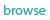
<style>
.page{position:relative;width:50px;height:20px;background:#ffffff}
.page>*{position:absolute;margin:0}
.t1{font:14px "MyriadPro-Regular";color:#36a1b9}
</style>
<div class="page">
<p class="t1" style="left:4px;top:5px;width:42px;height:10px">browse</p>
</div>
